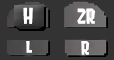
<style>
.page{position:relative;width:114px;height:60px;background:#333333}
.page>*{position:absolute;margin:0}
.t1{font:18.3px "Splatoon2"}
.t2{font:19.4px "Splatoon2";color:#ffffff}
.t3{font:18.3px "Splatoon2";color:#ffffff}
.t4{font:16.2px "Splatoon2";color:#ffffff}
.t5{font:16.5px "Splatoon2";color:#ffffff}
</style>
<div class="page">
<p class="t1" style="left:20px;top:8px;width:16px;height:16px">ZL</p>
<p class="t2" style="left:23px;top:7px;width:10px;height:17px">H</p>
<p class="t3" style="left:77px;top:8px;width:18px;height:16px">ZR</p>
<p class="t4" style="left:26px;top:39px;width:6px;height:14px">L</p>
<p class="t5" style="left:81px;top:40px;width:9px;height:15px">R</p>
</div>
